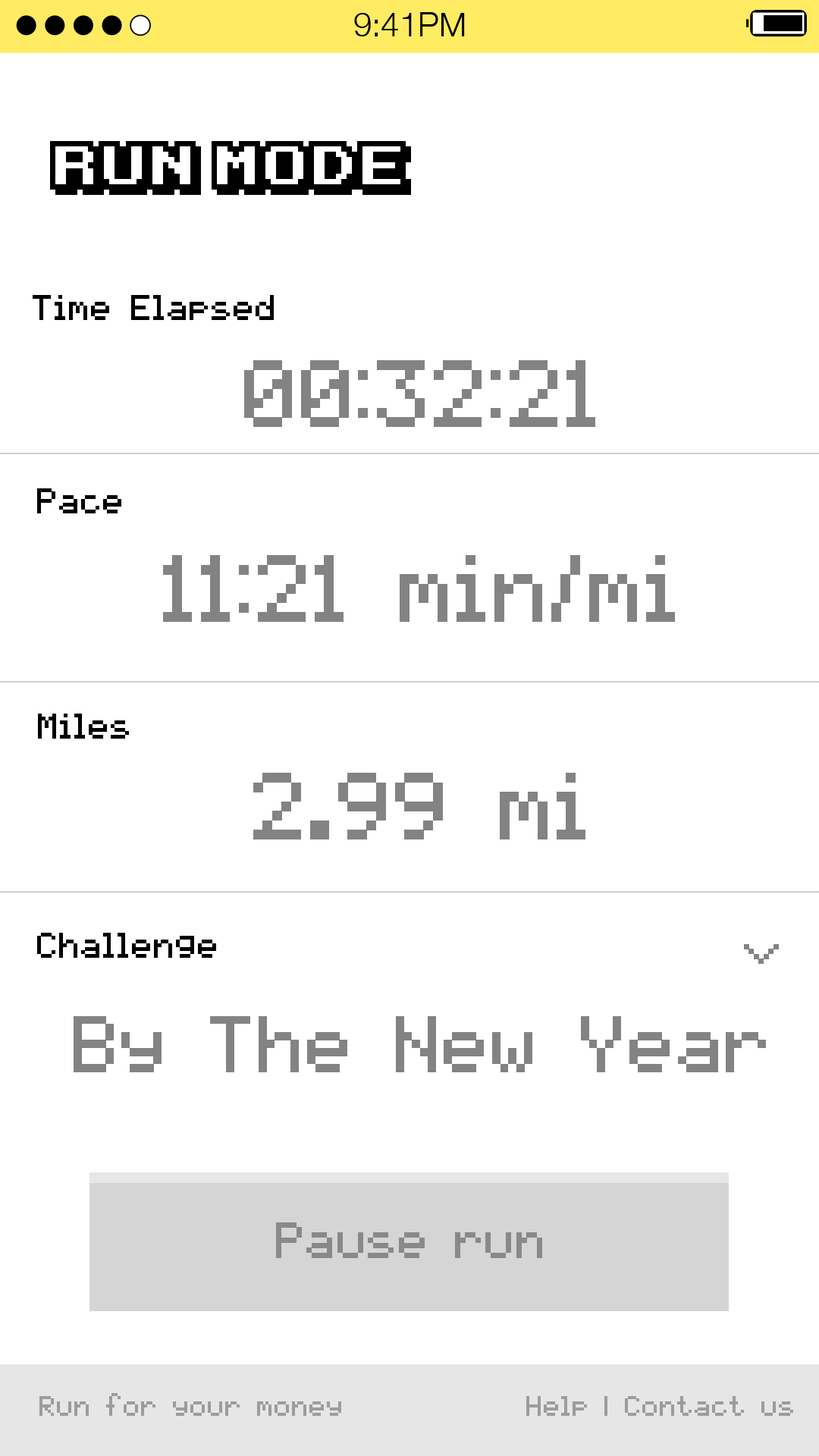
<style>
.page{position:relative;width:819px;height:1456px;background:#ffffff}
.page>*{position:absolute;margin:0}
.t1{font:55.4px "KarmaticArcade";color:#000000}
.t2{font:28.8px "pixelmix";color:#000000}
.t3{font:75.8px "pixelmix";color:#838383}
.t4{font:39.4px "pixelmix";color:#838383}
.t5{font:64.5px "pixelmix";color:#838383}
.t6{font:40.9px "pixelmix";color:#898989}
.t7{font:22.7px "pixelmix";color:#9c9c9c}
</style>
<div class="page">
<p class="t1" style="left:50px;top:141px;width:361px;height:54px">Run mode</p>
<p class="t2" style="left:33px;top:295px;width:241px;height:25px">Time Elapsed</p>
<p class="t3" style="left:244px;top:360px;width:351px;height:67px">00:32:21</p>
<p class="t2" style="left:37px;top:488px;width:84px;height:25px">Pace</p>
<p class="t3" style="left:163px;top:555px;width:512px;height:67px">11:21 min/mi</p>
<p class="t2" style="left:38px;top:714px;width:91px;height:25px">Miles</p>
<p class="t3" style="left:253px;top:773px;width:332px;height:66px">2.99 mi</p>
<p class="t2" style="left:37px;top:933px;width:179px;height:25px">Challenge</p>
<p class="t4" style="left:744px;top:944px;width:35px;height:20px;rotate:90deg">&gt;</p>
<p class="t5" style="left:74px;top:1016px;width:692px;height:56px">By The New Year</p>
<p class="t6" style="left:276px;top:1222px;width:266px;height:36px">Pause run</p>
<p class="t7" style="left:39px;top:1393px;width:302px;height:23px">Run for your money</p>
<p class="t7" style="left:526px;top:1396px;width:267px;height:20px">Help | Contact us</p>
</div>
